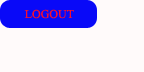
<style>
.page{position:relative;width:144px;height:72px;background:#fffafa}
.page>*{position:absolute;margin:0}
.t1{font:12px "TimesNewRomanPSMT";color:#f60f30}
</style>
<div class="page">
<p class="t1" style="left:24px;top:9px;width:50px;height:10px">LOGOUT</p>
</div>
